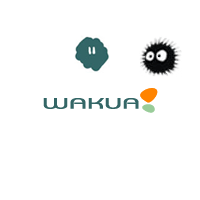
<style>
.page{position:relative;width:200px;height:200px;background:#ffffff}
.page>*{position:absolute;margin:0}
.t1{font:15px "BauhausITCbyBT-Medium";color:#336666;scale:2 1}
</style>
<div class="page">
<p class="t1" style="left:43px;top:98px;width:96px;height:11px">WAKUA</p>
<p class="t1" style="left:43px;top:98px;width:96px;height:11px">WAKUA</p>
</div>
